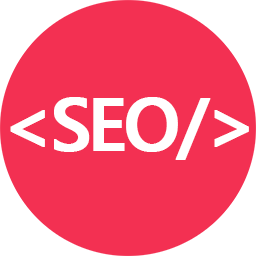
<style>
.page{position:relative;width:256px;height:256px;background:#f33052}
.page>*{position:absolute;margin:0}
.t1{font:73.9px "SegoeUI-Semibold";letter-spacing:-0.06em;color:#ffffff;font-weight:bold}
</style>
<div class="page">
<p class="t1" style="left:10px;top:97px;width:239px;height:63px">&lt;SEO/&gt;</p>
</div>
